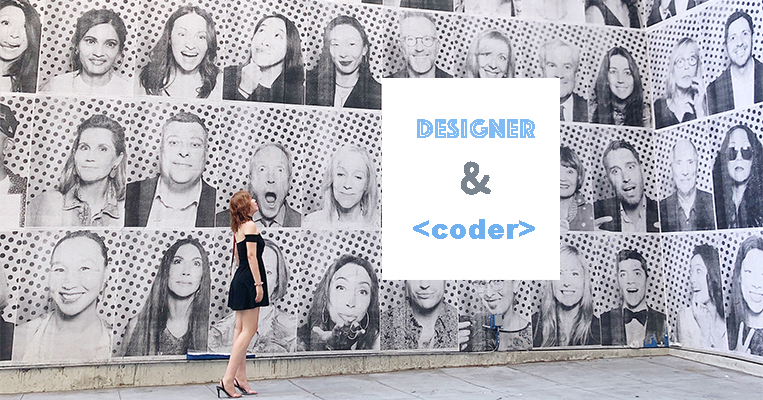
<style>
.page{position:relative;width:763px;height:400px}
.page>*{position:absolute;margin:0}
.t1{font:28.2px "Phosphate-Inline";color:#80bbf6}
.t2{font:45.1px "ChalkboardSE-Bold";color:#7a848e}
.t3{font:28.2px "Arial-Black";color:#6fb0f0}
</style>
<div class="page">
<p class="t1" style="left:417px;top:119px;width:118px;height:19px">Designer</p>
<p class="t2" style="left:461px;top:161px;width:30px;height:34px">&amp;</p>
<p class="t3" style="left:413px;top:219px;width:122px;height:20px">&lt;coder&gt;</p>
</div>
